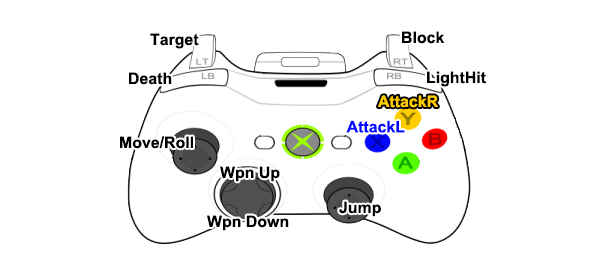
<style>
.page{position:relative;width:600px;height:278px;background:#ffffff}
.page>*{position:absolute;margin:0}
.t1{font:15.9px "Arial-BoldMT";color:#000000}
.t2{font:15.9px "Arial-BoldMT";color:#ffcc00}
.t3{font:15.9px "Arial-BoldMT";color:#0006ff}
</style>
<div class="page">
<p class="t1" style="left:150px;top:33px;width:49px;height:16px">Target</p>
<p class="t1" style="left:402px;top:31px;width:43px;height:13px">Block</p>
<p class="t1" style="left:129px;top:72px;width:43px;height:13px">Death</p>
<p class="t1" style="left:427px;top:71px;width:59px;height:16px">LightHit</p>
<p class="t2" style="left:378px;top:95px;width:60px;height:13px">AttackR</p>
<p class="t3" style="left:346px;top:120px;width:59px;height:13px">AttackL</p>
<p class="t1" style="left:120px;top:136px;width:73px;height:13px">Move/Roll</p>
<p class="t1" style="left:220px;top:166px;width:60px;height:16px">Wpn Up</p>
<p class="t1" style="left:339px;top:201px;width:42px;height:16px">Jump</p>
<p class="t1" style="left:207px;top:215px;width:82px;height:16px">Wpn Down</p>
</div>
